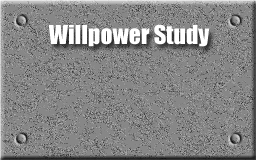
<style>
.page{position:relative;width:256px;height:160px;background:#878787}
.page>*{position:absolute;margin:0}
.t1{font:24px "Impact";color:#ffffff}
</style>
<div class="page">
<p class="t1" style="left:48px;top:24px;width:162px;height:23px">Willpower Study</p>
</div>
